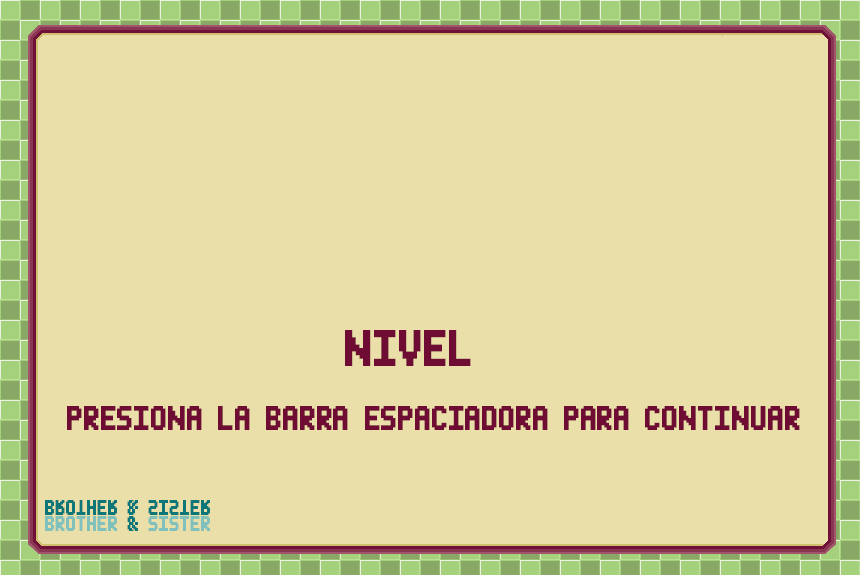
<style>
.page{position:relative;width:860px;height:575px;background:#ebdfa9}
.page>*{position:absolute;margin:0}
.t1{font:72px "MiniPixel-7";color:#6e0c33}
.t2{font:48px "MiniPixel-7";color:#6e0c33}
.t3{font:30px "MiniPixel-7";color:#0d7678}
.t4{font:30px "MiniPixel-7";color:#81c1bd}
</style>
<div class="page">
<p class="t1" style="left:345px;top:330px;width:126px;height:36px">NIVEL</p>
<p class="t2" style="left:67px;top:406px;width:733px;height:24px">PRESIONA LA BARRA ESPACIADORA PARA CONTINUAR</p>
<p class="t3" style="left:45px;top:500px;width:165px;height:15px">BROTHER &amp; SISTER</p>
<p class="t4" style="left:45px;top:516px;width:165px;height:15px">BROTHER <span class="t3">&amp;</span> SISTER</p>
</div>
